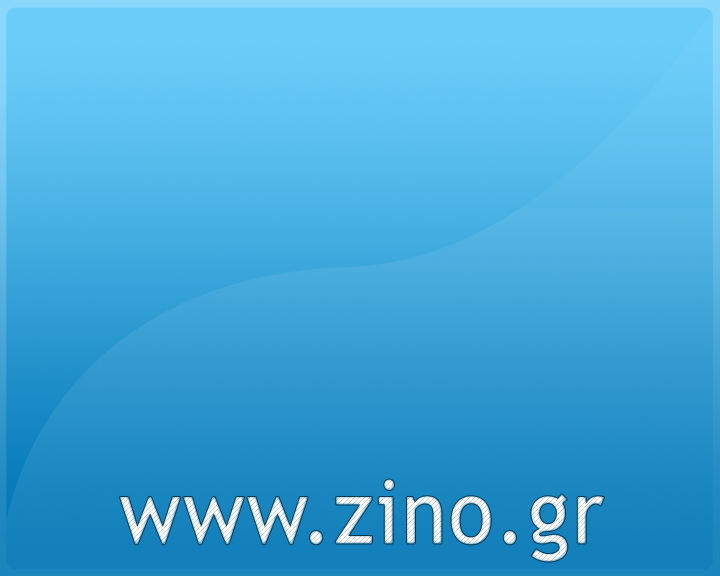
<style>
.page{position:relative;width:720px;height:576px}
.page>*{position:absolute;margin:0}
.t1{font:88.1px "TrebuchetMS";font-weight:bold;scale:0.94 1}
</style>
<div class="page">
<p class="t1" style="left:120px;top:479px;width:484px;height:83px">www.zino.gr</p>
</div>
